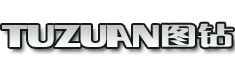
<style>
.page{position:relative;width:235px;height:75px;background:#ffffff}
.page>*{position:absolute;margin:0}
.t1{font:36px "Excelsior";letter-spacing:-0.075em;text-transform:uppercase;scale:0.79 1}
.t2{font:24.7px "FZCQJW--GB1-0";color:#e1e1e1;text-transform:uppercase;font-weight:bold;scale:1.45 1}
</style>
<div class="page">
<p class="t1" style="left:2px;top:25px;width:157px;height:22px">tuzuan</p>
<p class="t2" style="left:162px;top:23px;width:71px;height:25px">图钻</p>
</div>
